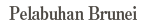
<style>
.page{position:relative;width:145px;height:27px;background:#ffffff}
.page>*{position:absolute;margin:0}
.t1{font:18px "RyuminPro-ExBold";letter-spacing:-0.04em;color:#4c4843;scale:0.9 1}
</style>
<div class="page">
<p class="t1" style="left:9px;top:6px;width:128px;height:14px">Pelabuhan Brunei</p>
</div>
